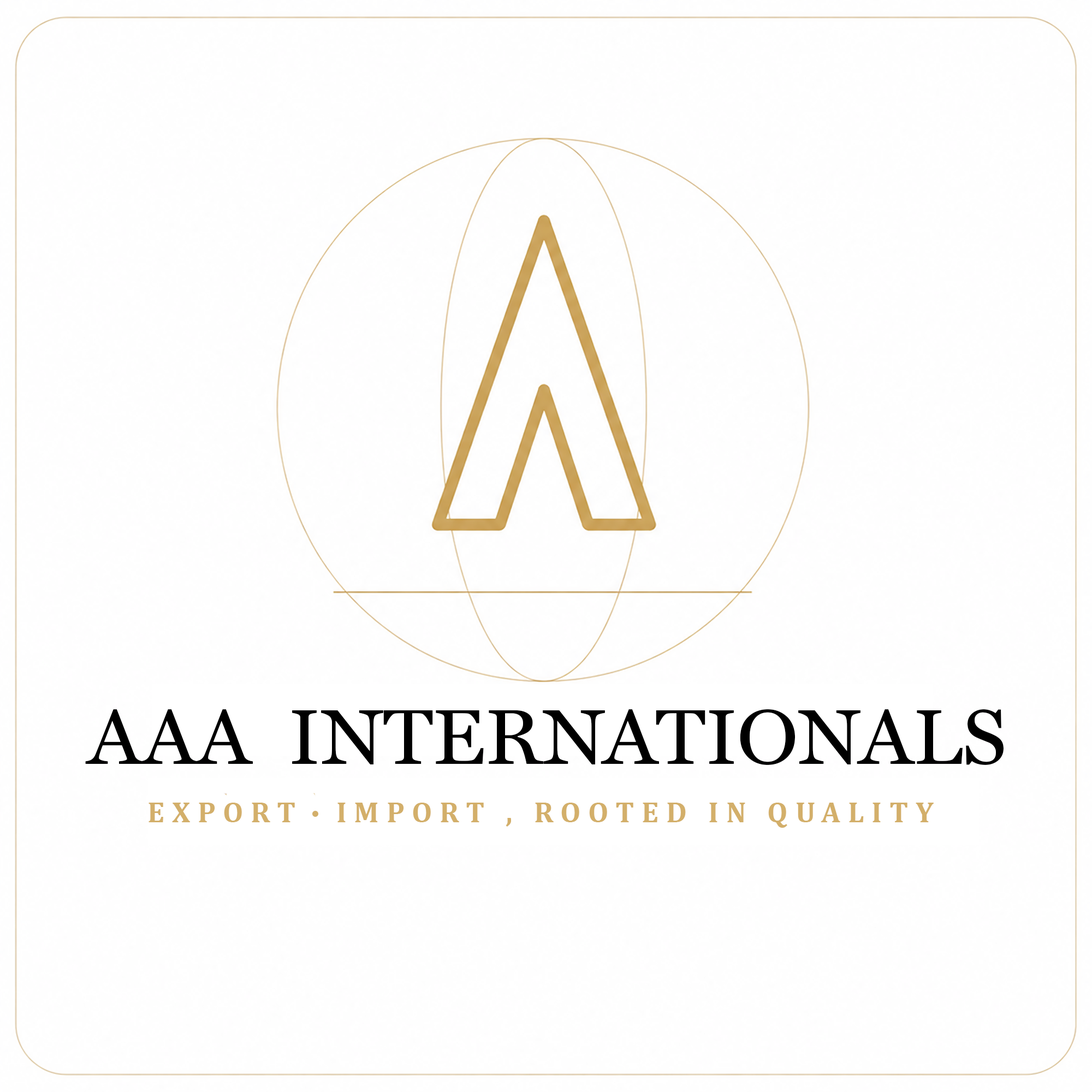
<style>
.page{position:relative;width:1092px;height:1092px;background:#fefefe}
.page>*{position:absolute;margin:0}
.t1{font:78.2px "Miller-Text";color:#000000}
.t2{font:29.6px "Cambria-Bold";letter-spacing:0.25em;color:#d3af6a}
</style>
<div class="page">
<p class="t1" style="left:85px;top:709px;width:919px;height:56px">AAA  INTERNATIONALS</p>
<p class="t2" style="left:149px;top:803px;width:146px;height:19px">EXPORT</p>
<p class="t2" style="left:337px;top:803px;width:597px;height:25px">IMPORT , ROOTED IN QUALITY</p>
</div>
